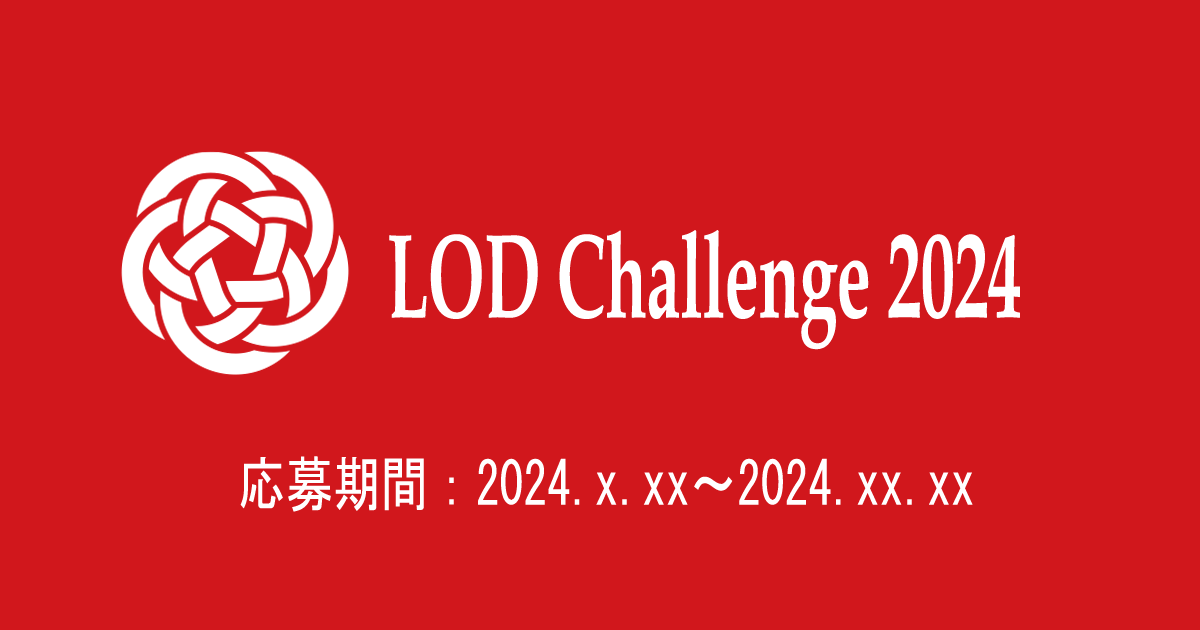
<style>
.page{position:relative;width:1200px;height:630px;background:#d1171c}
.page>*{position:absolute;margin:0}
.t1{font:120px "BookAntiqua-Bold";color:#ffffff;scale:0.56 1}
.t2{font:60px "MS-Gothic";color:#ffffff;scale:0.79 1}
</style>
<div class="page">
<p class="t1" style="left:389px;top:230px;width:631px;height:120px">LOD Challenge 2024</p>
<p class="t2" style="left:240px;top:456px;width:733px;height:56px">応募期間：2024.x.xx～2024.xx.xx</p>
</div>
